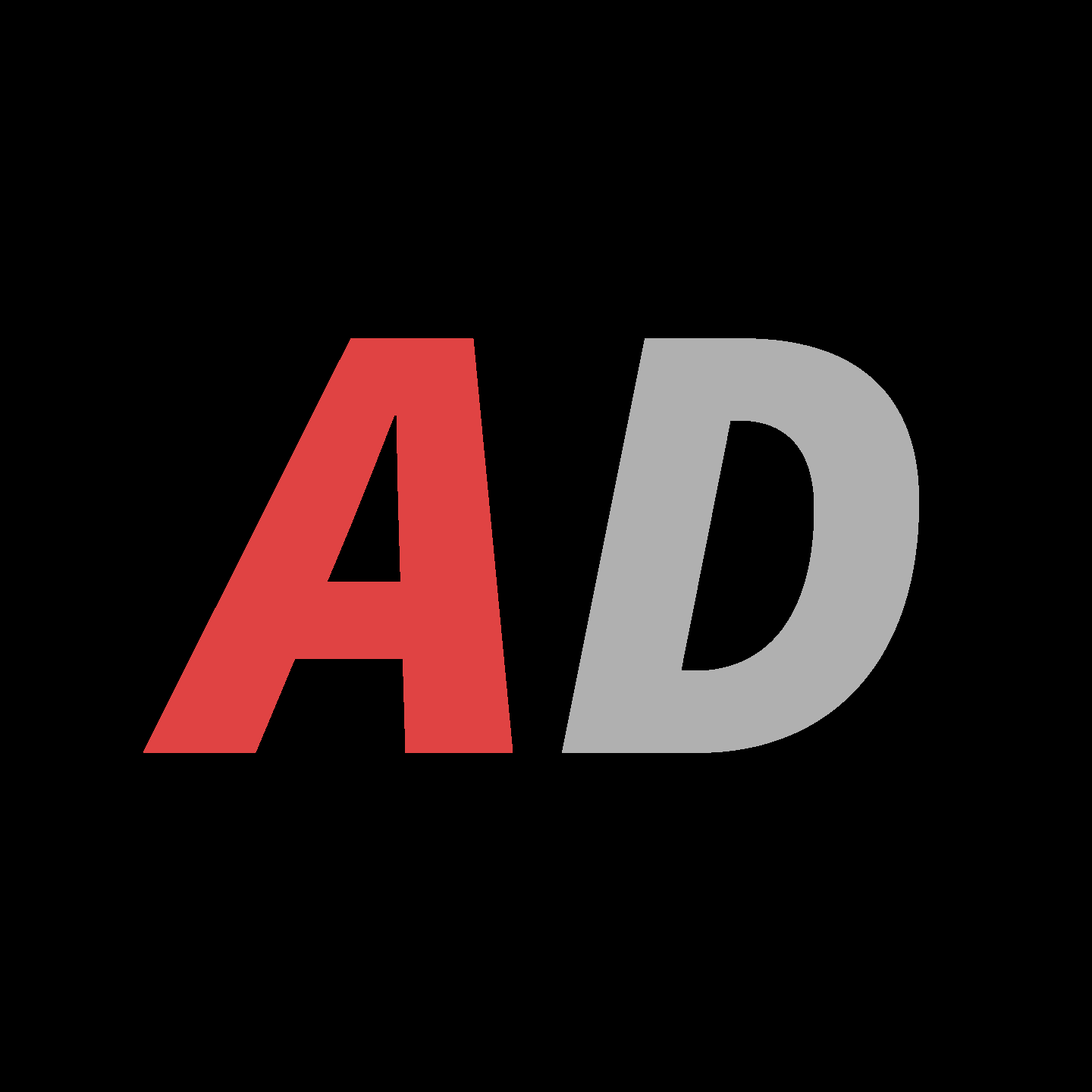
<style>
.page{position:relative;width:1092px;height:1092px;background:#000000}
.page>*{position:absolute;margin:0}
.t1{font:636.7px "SourceCodeItalic-BlackItalic";color:#e04343}
.t2{font:636.7px "SourceCodeItalic-BlackItalic";color:#b0b0b0}
</style>
<div class="page">
<p class="t1" style="left:143px;top:338px;width:776px;height:415px">A<span class="t2">D</span></p>
</div>
